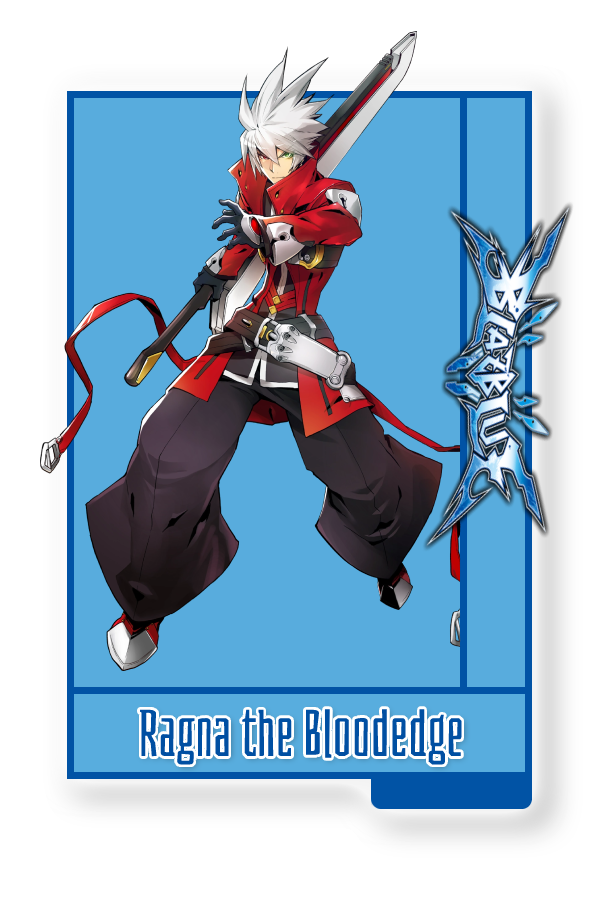
<style>
.page{position:relative;width:600px;height:900px;background:#58acdd}
.page>*{position:absolute;margin:0}
.t1{font:65px "Bahianita-Regular";color:#004fa2}
</style>
<div class="page">
<p class="t1" style="left:140px;top:709px;width:322px;height:56px">Ragna the Bloodedge</p>
</div>
